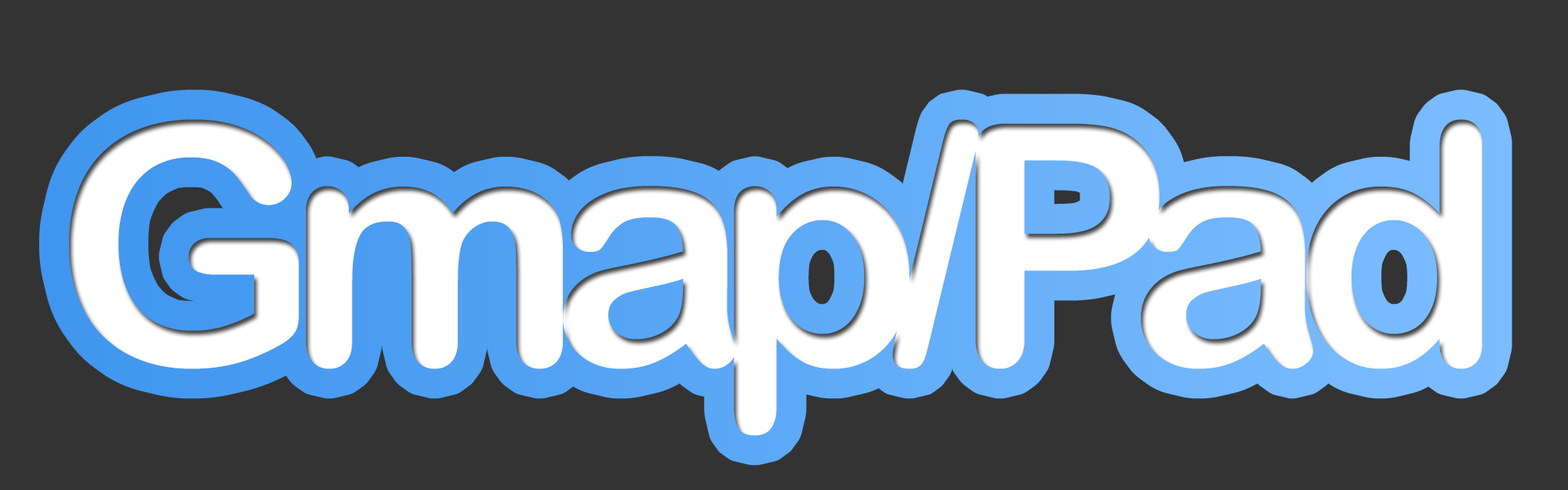
<style>
.page{position:relative;width:1568px;height:490px;background:#333333}
.page>*{position:absolute;margin:0}
.t1{font:336.5px "ArialRoundedMTBold";letter-spacing:-0.1em;color:#ffffff}
</style>
<div class="page">
<p class="t1" style="left:68px;top:119px;width:1415px;height:317px">Gmap/Pad</p>
</div>
